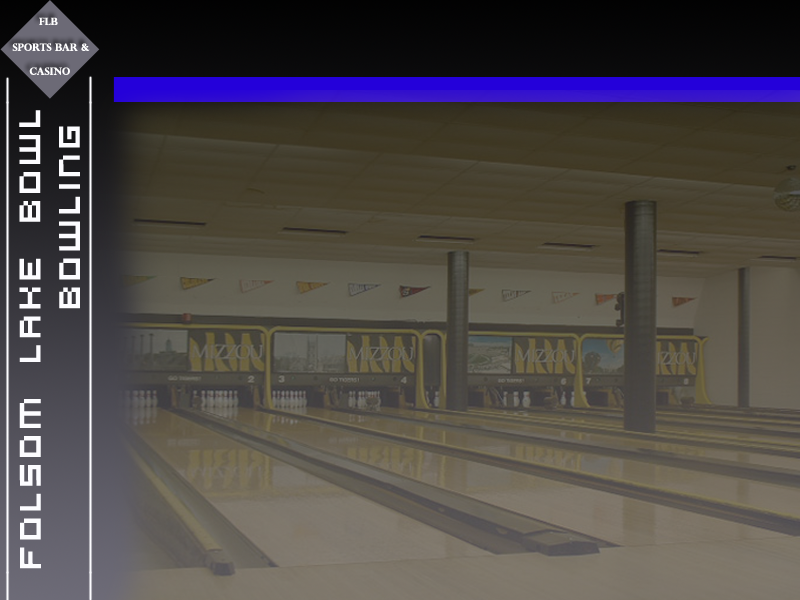
<style>
.page{position:relative;width:800px;height:600px}
.page>*{position:absolute;margin:0}
.t1{font:10px "PerpetuaTitlingMT-Bold";color:#ffffff}
.t2{font:33px "VirtualDJ";color:#fcfcff}
</style>
<div class="page">
<p class="t1" style="left:39px;top:17px;width:19px;height:8px">FLB</p>
<p class="t1" style="left:12px;top:43px;width:78px;height:32px">Sports bar &amp;<br><br>     Casino</p>
<p class="t2" style="left:19px;top:110px;width:61px;height:459px;rotate:-90deg">Folsom Lake Bowl<br>         Bowling</p>
</div>
